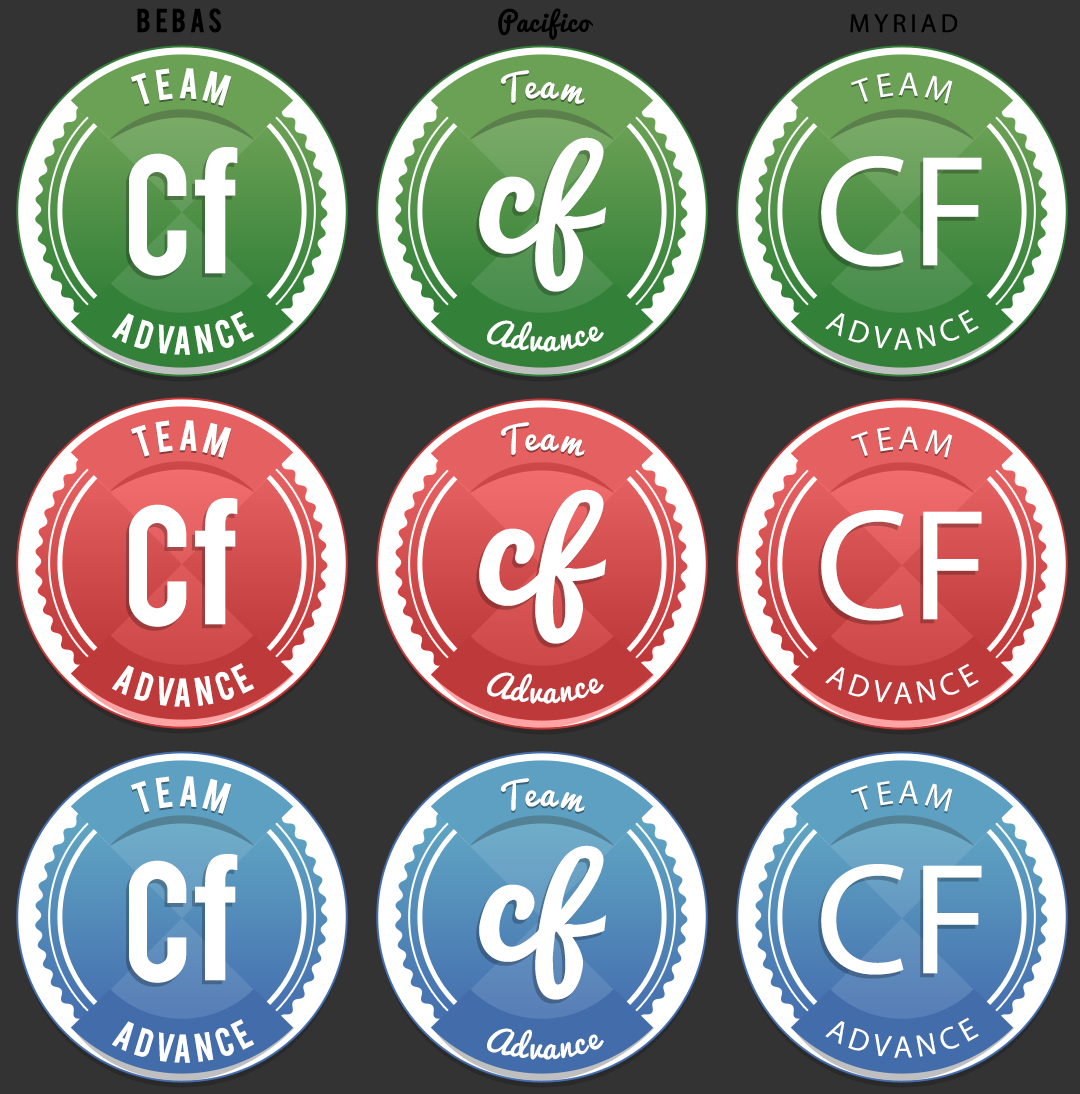
<style>
.page{position:relative;width:1080px;height:1094px;background:#333333}
.page>*{position:absolute;margin:0}
.t1{font:26px "Bebas";letter-spacing:0.16em;color:#000000}
.t2{font:26px "Pacifico";letter-spacing:0.04em;color:#000000}
.t3{font:26px "MyriadPro-Regular";letter-spacing:0.16em;color:#000000}
.t4{font:33.7px "Bebas";letter-spacing:0.1em;color:#ffffff}
.t5{font:33.7px "Pacifico";letter-spacing:0.08em;color:#ffffff}
.t6{font:33.7px "MyriadPro-Regular";letter-spacing:0.1em;color:#ffffff}
.t7{font:158.2px "Pacifico";color:#ffffff}
.t8{font:128.2px "Pacifico";color:#ffffff;scale:1.24 1}
.t9{font:133.4px "Bebas";letter-spacing:0.02em;color:#ffffff}
.t10{font:170.4px "LeagueGothic-Regular";letter-spacing:0.02em;color:#ffffff;scale:1.15 1}
.t11{font:159px "MyriadPro-Regular";color:#ffffff}
.t12{font:31.3px "Bebas";letter-spacing:0.16em;color:#ffffff}
.t13{font:31.3px "MyriadPro-Regular";letter-spacing:0.16em;color:#ffffff}
.t14{font:31.3px "Pacifico";letter-spacing:0.08em;color:#ffffff}
</style>
<div class="page">
<p class="t1" style="left:137px;top:8px;width:84px;height:25px">Bebas</p>
<p class="t2" style="left:498px;top:8px;width:95px;height:32px">Pacifico</p>
<p class="t3" style="left:850px;top:14px;width:108px;height:19px">MYRIAD</p>
<p class="t4" style="left:131px;top:68px;width:101px;height:38px">TEAM</p>
<p class="t5" style="left:501px;top:70px;width:84px;height:34px">Team</p>
<p class="t6" style="left:851px;top:72px;width:102px;height:32px">TEAM</p>
<p class="t7" style="left:479px;top:137px;width:127px;height:155px">c<span class="t8">f</span></p>
<p class="t9" style="left:129px;top:147px;width:109px;height:129px">C<span class="t10">f</span></p>
<p class="t11" style="left:821px;top:156px;width:161px;height:111px">CF</p>
<p class="t12" style="left:112px;top:311px;width:142px;height:44px">ADVANCE</p>
<p class="t13" style="left:825px;top:309px;width:154px;height:41px">ADVANCE</p>
<p class="t14" style="left:487px;top:320px;width:117px;height:32px">Advance</p>
<p class="t4" style="left:131px;top:420px;width:101px;height:38px">TEAM</p>
<p class="t5" style="left:501px;top:422px;width:84px;height:34px">Team</p>
<p class="t6" style="left:851px;top:426px;width:102px;height:32px">TEAM</p>
<p class="t7" style="left:479px;top:489px;width:127px;height:155px">c<span class="t8">f</span></p>
<p class="t9" style="left:129px;top:498px;width:109px;height:129px">C<span class="t10">f</span></p>
<p class="t11" style="left:821px;top:510px;width:161px;height:111px">CF</p>
<p class="t12" style="left:112px;top:663px;width:142px;height:44px">ADVANCE</p>
<p class="t13" style="left:825px;top:663px;width:154px;height:41px">ADVANCE</p>
<p class="t14" style="left:487px;top:672px;width:117px;height:32px">Advance</p>
<p class="t4" style="left:131px;top:776px;width:101px;height:38px">TEAM</p>
<p class="t5" style="left:501px;top:778px;width:84px;height:34px">Team</p>
<p class="t6" style="left:851px;top:780px;width:102px;height:32px">TEAM</p>
<p class="t7" style="left:479px;top:845px;width:127px;height:155px">c<span class="t8">f</span></p>
<p class="t9" style="left:129px;top:854px;width:109px;height:129px">C<span class="t10">f</span></p>
<p class="t11" style="left:821px;top:864px;width:161px;height:111px">CF</p>
<p class="t12" style="left:112px;top:1019px;width:142px;height:44px">ADVANCE</p>
<p class="t13" style="left:825px;top:1017px;width:154px;height:41px">ADVANCE</p>
<p class="t14" style="left:487px;top:1028px;width:117px;height:32px">Advance</p>
</div>
